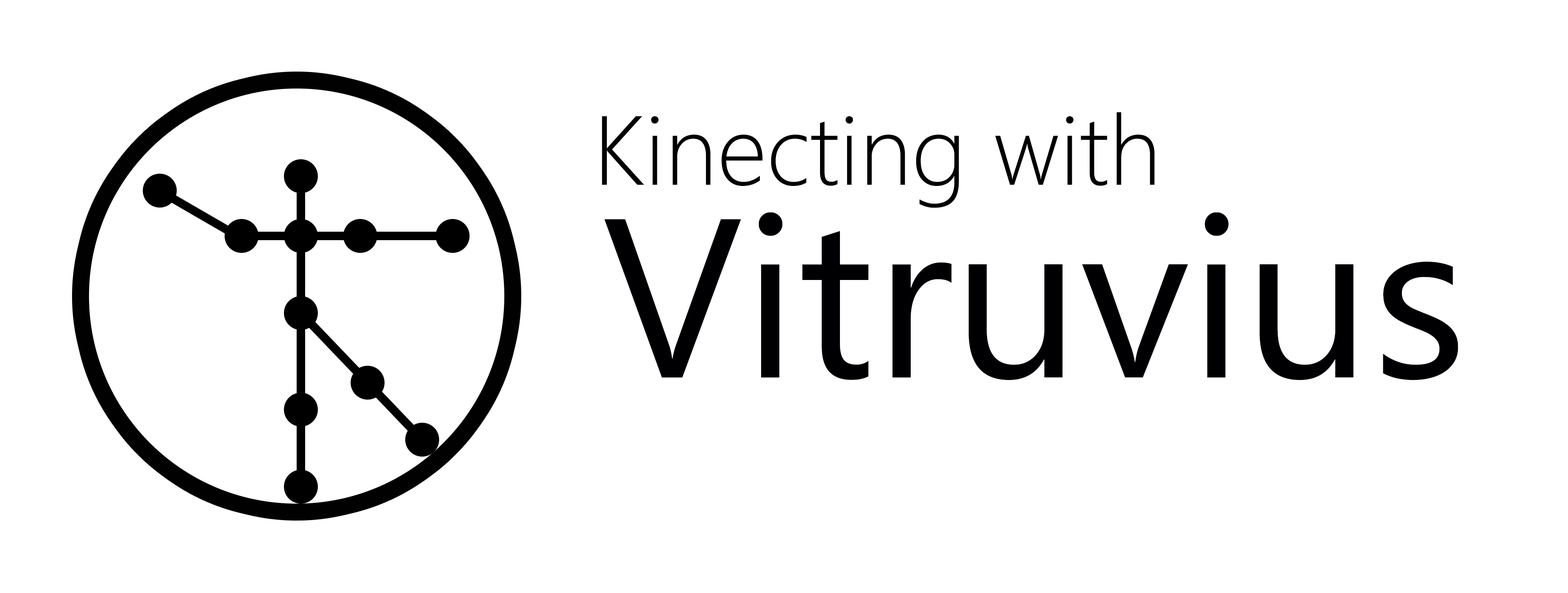
<style>
.page{position:relative;width:1568px;height:593px;background:#ffffff}
.page>*{position:absolute;margin:0}
.t1{font:97.9px "SegoeUI-Light";color:#000002}
.t2{font:226px "SegoeUI";color:#000002}
</style>
<div class="page">
<p class="t1" style="left:602px;top:112px;width:553px;height:96px">Kinecting with</p>
<p class="t2" style="left:604px;top:212px;width:854px;height:169px">Vitruvius</p>
</div>
